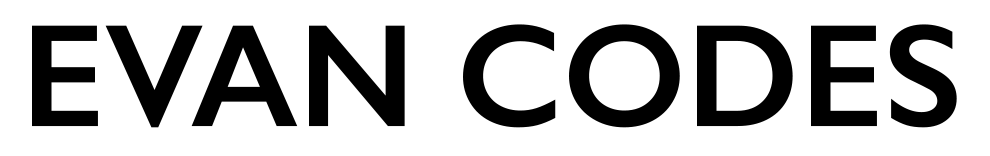
<style>
.page{position:relative;width:990px;height:156px;background:#ffffff}
.page>*{position:absolute;margin:0}
.t1{font:147px "GillSans-SemiBold";color:#000000}
</style>
<div class="page">
<p class="t1" style="left:32px;top:24px;width:925px;height:104px">EVAN CODES</p>
</div>
